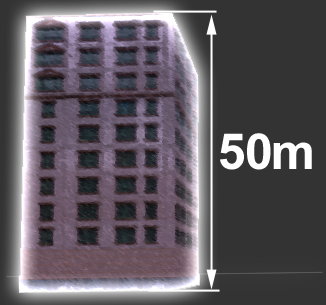
<style>
.page{position:relative;width:326px;height:305px;background:#333333}
.page>*{position:absolute;margin:0}
.t1{font:50px "Arial-BoldMT";letter-spacing:-0.025em;color:#ffffff}
</style>
<div class="page">
<p class="t1" style="left:220px;top:133px;width:92px;height:37px">50m</p>
</div>
